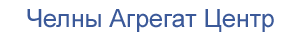
<style>
.page{position:relative;width:300px;height:40px;background:#ffffff}
.page>*{position:absolute;margin:0}
.t1{font:25px "ArialMT";color:#3b5999}
</style>
<div class="page">
<p class="t1" style="left:27px;top:9px;width:247px;height:23px">Челны Агрегат Центр</p>
</div>
